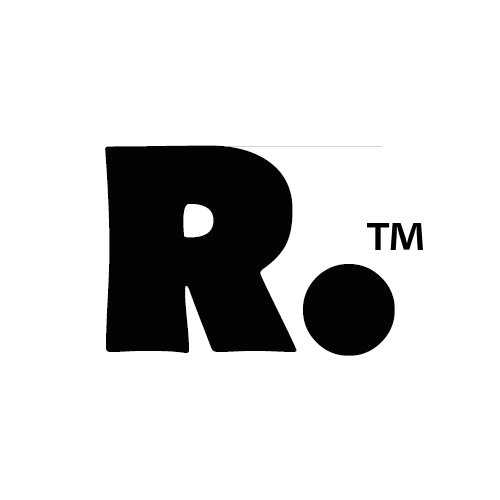
<style>
.page{position:relative;width:500px;height:500px;background:#ffffff}
.page>*{position:absolute;margin:0}
.t1{font:300px "BerlinSansFB-Bold";color:#030303}
</style>
<div class="page">
<p class="t1" style="left:105px;top:145px;width:290px;height:211px">R.</p>
</div>
